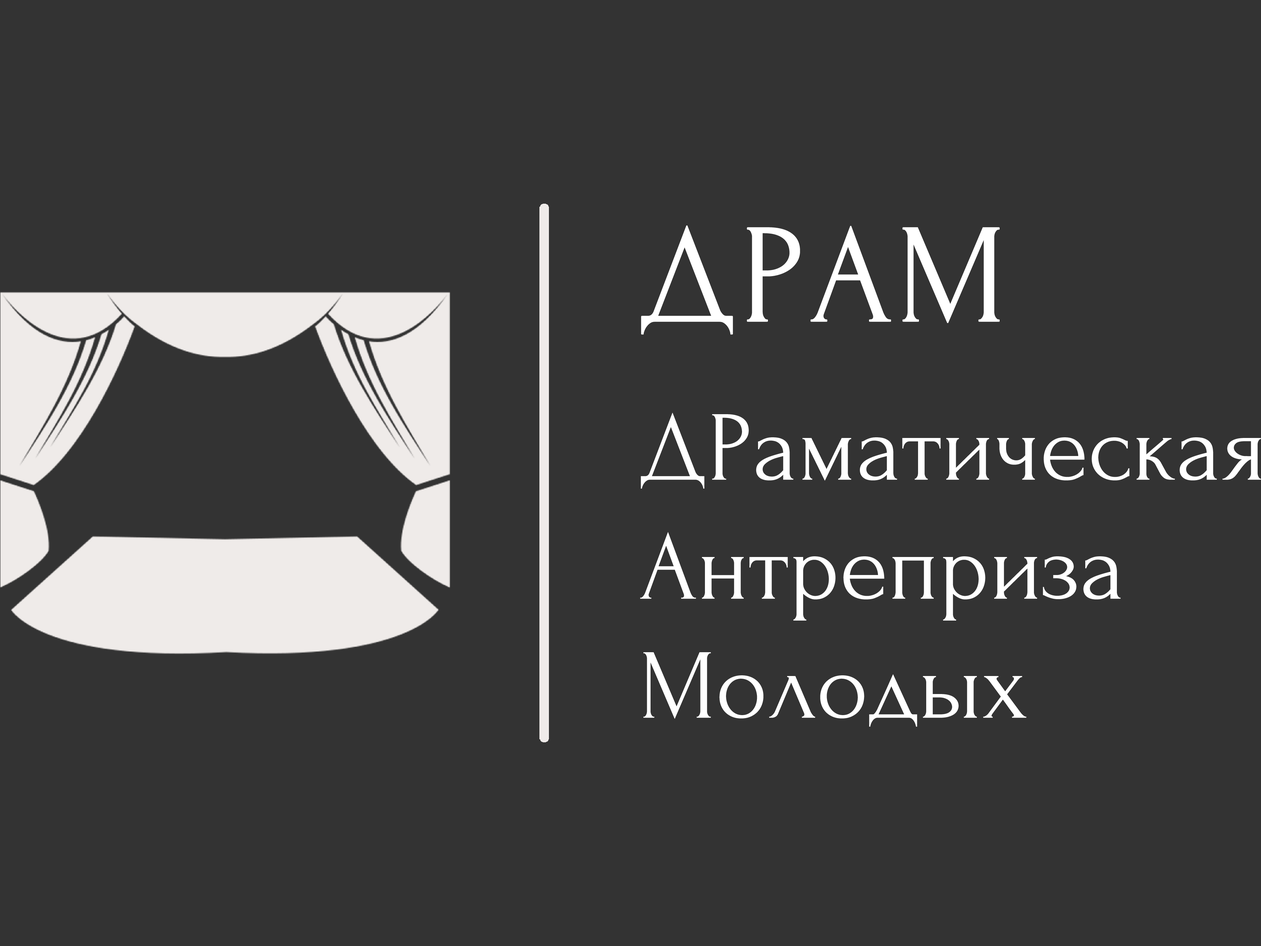
<style>
.page{position:relative;width:1261px;height:946px;background:#333333}
.page>*{position:absolute;margin:0}
.t1{font:141.6px "Forum";color:#ffffff;font-weight:bold}
.t2{font:99.1px "Forum";color:#ffffff}
</style>
<div class="page">
<p class="t1" style="left:641px;top:225px;width:359px;height:109px">ДРАМ</p>
<p class="t2" style="left:640px;top:412px;width:621px;height:314px">ДРаматическая<br>Антреприза<br>Молодых</p>
</div>
